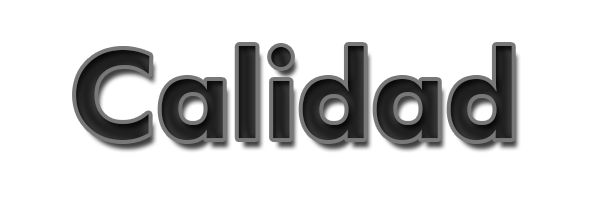
<style>
.page{position:relative;width:600px;height:200px;background:#ffffff}
.page>*{position:absolute;margin:0}
.t1{font:120px "FuturaBT-Heavy";color:#212121}
</style>
<div class="page">
<p class="t1" style="left:76px;top:46px;width:436px;height:94px">Calidad</p>
</div>
